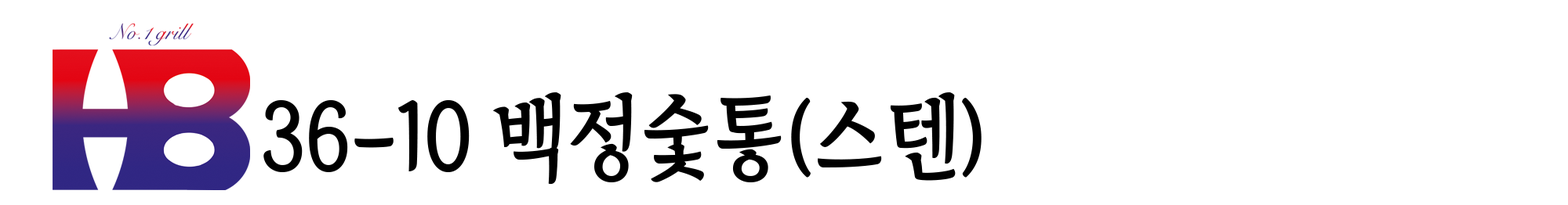
<style>
.page{position:relative;width:1568px;height:205px;background:#ffffff}
.page>*{position:absolute;margin:0}
.t1{font:94.1px "TheIndependenceHallofKorea-Regular";color:#000000;scale:0.89 1}
.t2{font:93.7px "TheIndependenceHallofKorea-Regular";color:#000000;scale:0.89 1}
</style>
<div class="page">
<p class="t1" style="left:263px;top:93px;width:719px;height:92px"><span class="t2">36-10 </span>백정숯통(스텐)</p>
</div>
